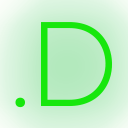
<style>
.page{position:relative;width:128px;height:128px}
.page>*{position:absolute;margin:0}
.t1{font:120px "NexaLight";color:#17e70d}
</style>
<div class="page">
<p class="t1" style="left:15px;top:22px;width:97px;height:86px">.D</p>
</div>
